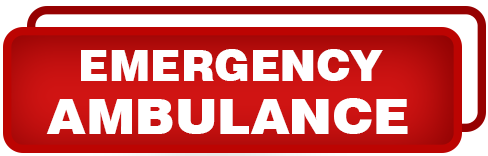
<style>
.page{position:relative;width:488px;height:156px;background:#ffffff}
.page>*{position:absolute;margin:0}
.t1{font:43.8px "Swiss721BT-Black";color:#ffffff;text-transform:uppercase}
.t2{font:48.3px "Swiss721BT-Black";color:#ffffff;text-transform:uppercase;scale:1.08 1}
</style>
<div class="page">
<p class="t1" style="left:81px;top:49px;width:302px;height:32px">emergency</p>
<p class="t2" style="left:46px;top:98px;width:362px;height:36px">Ambulance</p>
</div>
